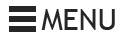
<style>
.page{position:relative;width:125px;height:38px;background:#ffffff}
.page>*{position:absolute;margin:0}
.t1{font:30px "TrebuchetMS";color:#262626}
</style>
<div class="page">
<p class="t1" style="left:41px;top:9px;width:74px;height:21px">MENU</p>
</div>
